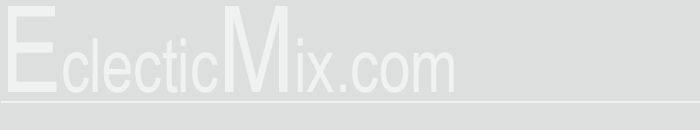
<style>
.page{position:relative;width:700px;height:130px;background:#dddede}
.page>*{position:absolute;margin:0}
.t1{font:75px "ArialNarrow";color:#f0f2f2;scale:0.92 1}
.t2{font:120px "ArialNarrow";color:#f0f2f2;scale:0.92 1}
</style>
<div class="page">
<p class="t1" style="left:8px;top:6px;width:446px;height:87px"><span class="t2">E</span>clectic<span class="t2">M</span>ix.com</p>
</div>
